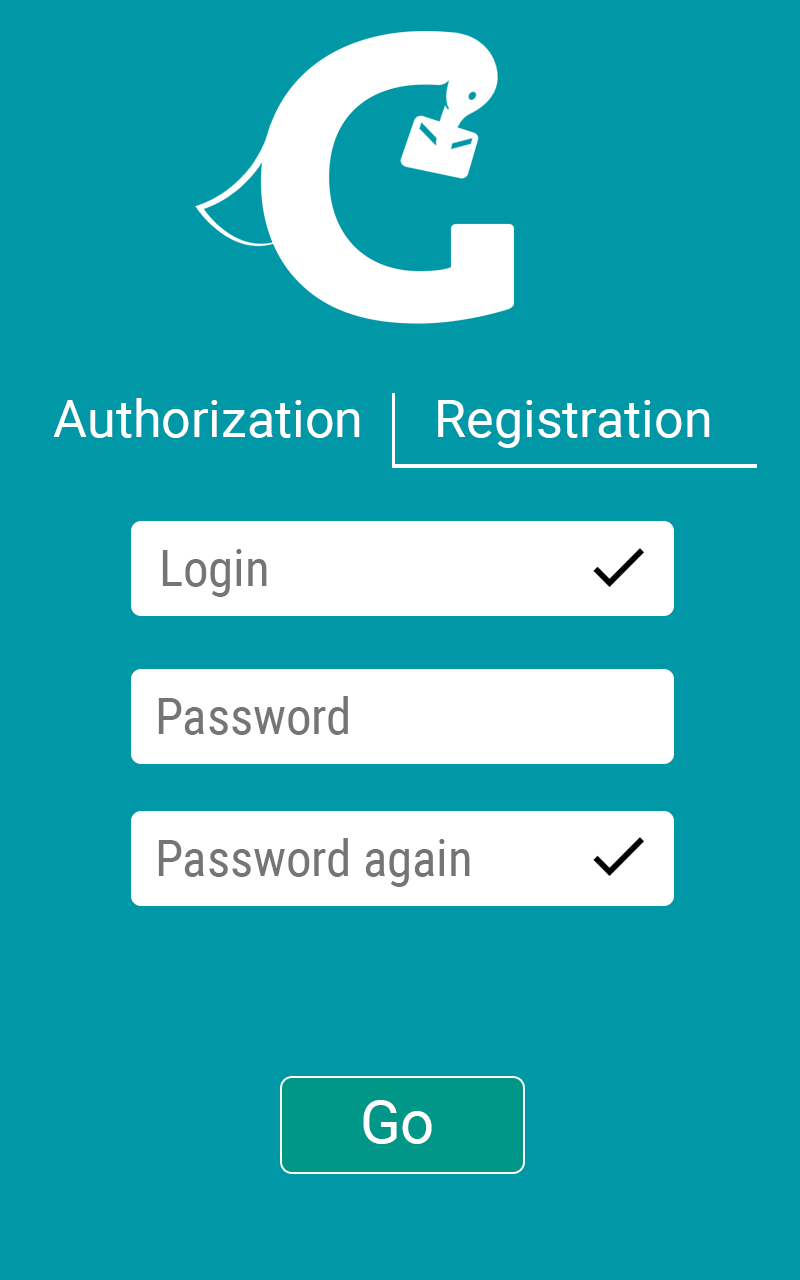
<style>
.page{position:relative;width:800px;height:1280px;background:#0097a7}
.page>*{position:absolute;margin:0}
.t1{font:52px "Roboto-Regular";color:#ffffff}
.t2{font:50.7px "RobotoCondensed-Regular";color:#757575}
.t3{font:60px "Roboto-Regular";color:#ffffff}
</style>
<div class="page">
<p class="t1" style="left:53px;top:398px;width:307px;height:40px">Authorization</p>
<p class="t1" style="left:438px;top:400px;width:272px;height:48px">Registration</p>
<p class="t2" style="left:162px;top:549px;width:105px;height:48px">Login</p>
<p class="t2" style="left:158px;top:696px;width:190px;height:39px">Password</p>
<p class="t2" style="left:158px;top:838px;width:312px;height:49px">Password again</p>
<p class="t3" style="left:363px;top:1100px;width:69px;height:44px">Go</p>
</div>
